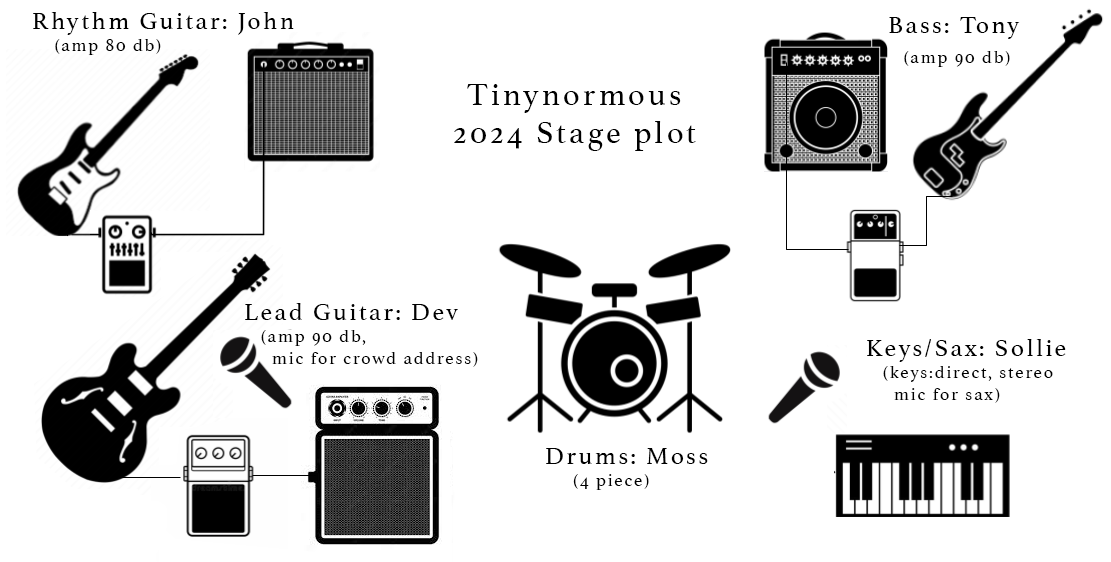
<style>
.page{position:relative;width:1111px;height:562px;background:#ffffff}
.page>*{position:absolute;margin:0}
.t1{font:25px "Athelas-Regular";letter-spacing:0.1em;color:#000000}
.t2{font:18px "Athelas-Regular";letter-spacing:0.1em;color:#000000}
.t3{font:32px "Athelas-Regular";letter-spacing:0.1em;color:#000000}
</style>
<div class="page">
<p class="t1" style="left:33px;top:12px;width:261px;height:43px">Rhythm Guitar: John<span class="t2"><br>    (amp 80 db)</span></p>
<p class="t2" style="left:889px;top:17px;width:131px;height:50px"><span class="t1">Bass: Tony<br>  </span>(amp 90 db)</p>
<p class="t3" style="left:454px;top:84px;width:242px;height:67px;text-align:center">Tinynormous<br>2024 Stage plot</p>
<p class="t2" style="left:245px;top:303px;width:233px;height:64px"><span class="t1">Lead Guitar: Dev<br></span>   (amp 90 db,<br>     mic for crowd address)</p>
<p class="t2" style="left:867px;top:339px;width:199px;height:64px"><span class="t1">Keys/Sax: Sollie<br></span>   (keys:direct, stereo<br>     mic for sax)</p>
<p class="t1" style="left:546px;top:448px;width:162px;height:42px">Drums: Moss<br><span class="t2">     (4 piece)</span></p>
</div>
